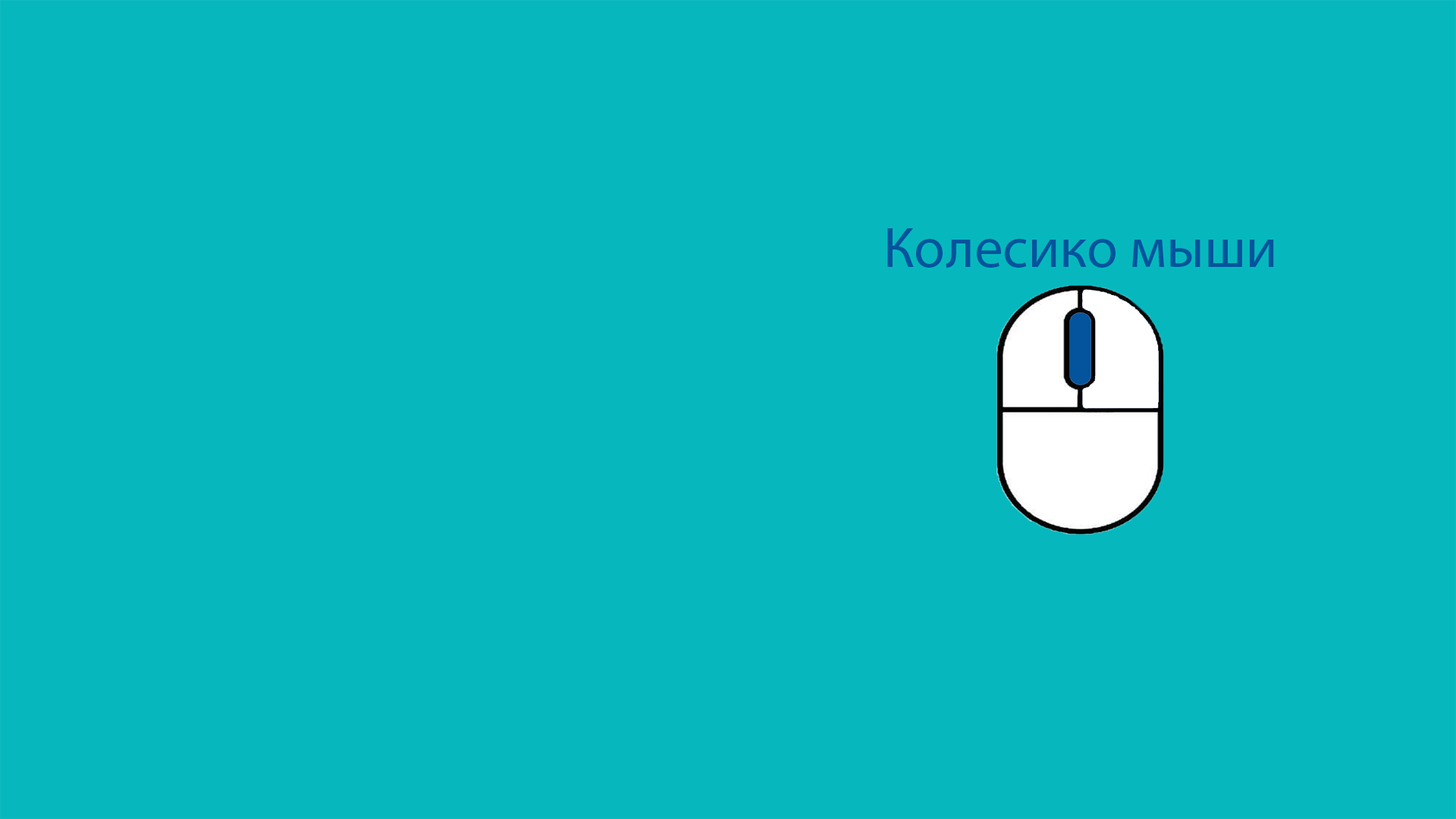
<style>
.page{position:relative;width:1456px;height:819px;background:#06b8be}
.page>*{position:absolute;margin:0}
.t1{font:56.9px "MyriadPro-Regular";color:#03549d}
</style>
<div class="page">
<p class="t1" style="left:887px;top:228px;width:387px;height:40px">Колесико мыши</p>
</div>
